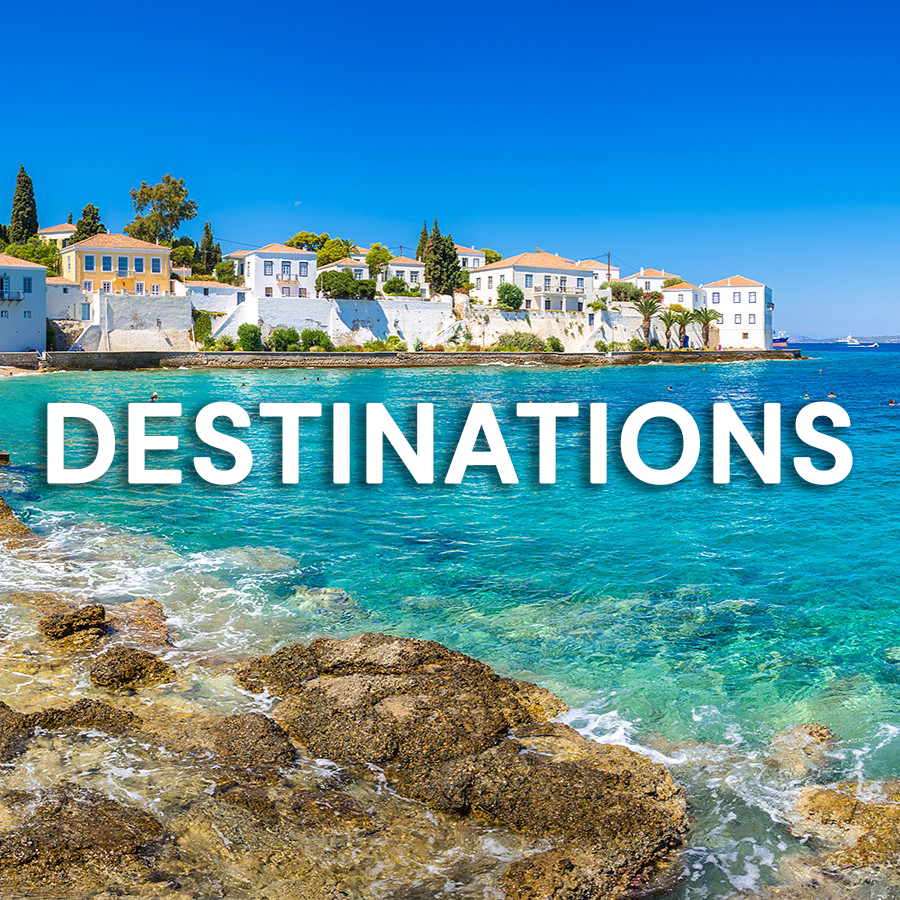
<style>
.page{position:relative;width:900px;height:900px}
.page>*{position:absolute;margin:0}
.t1{font:111px "DMSans-SemiBold";letter-spacing:0.005em;color:#ffffff;font-weight:bold}
</style>
<div class="page">
<p class="t1" style="left:47px;top:401px;width:806px;height:84px">DESTINATIONS</p>
</div>
